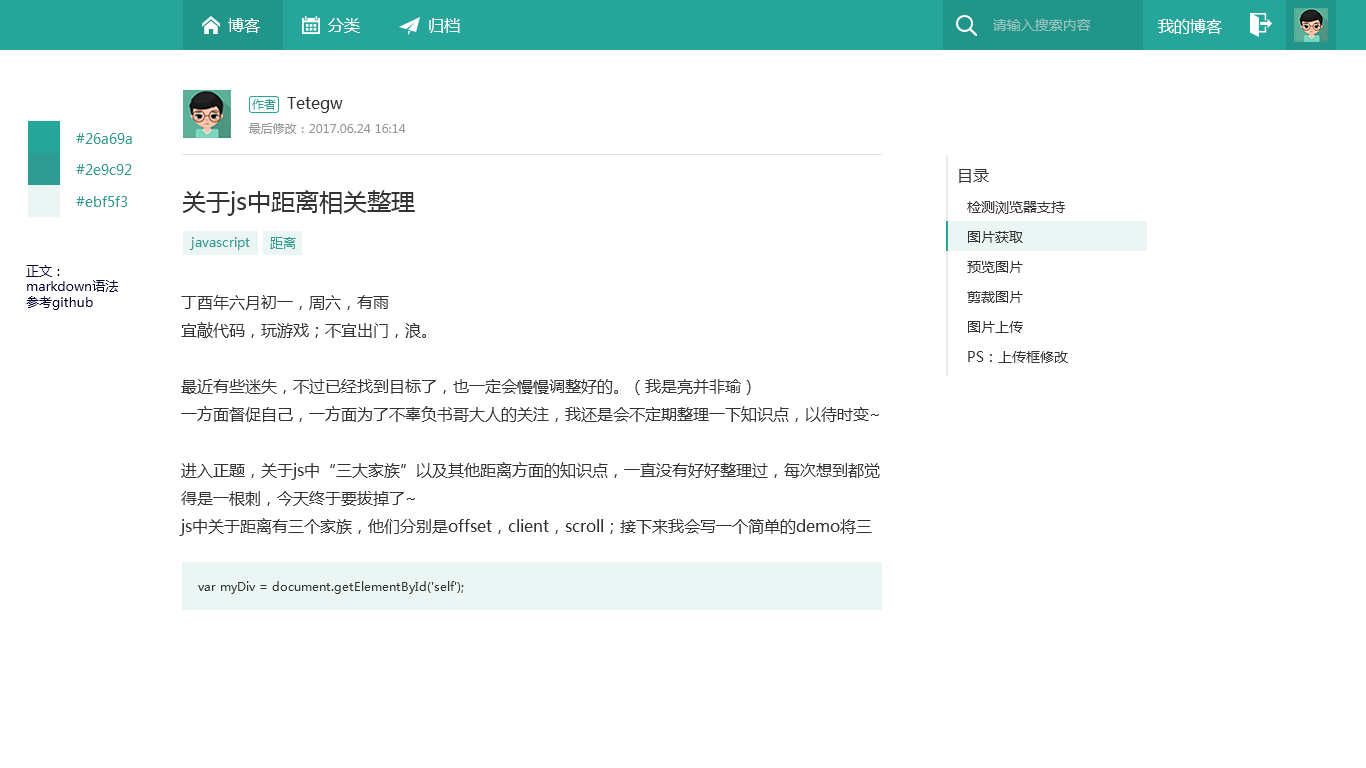
<style>
.page{position:relative;width:1366px;height:768px;background:#ffffff}
.page>*{position:absolute;margin:0}
.t1{font:16px "MicrosoftYaHei";color:#ffffff}
.t2{font:14px "MicrosoftYaHei";color:#95c4be}
.t3{font:12px "MicrosoftYaHei";color:#2e9c92}
.t4{font:16px "MicrosoftYaHei";color:#333333}
.t5{font:12px "MicrosoftYaHei";color:#969696}
.t6{font:14px "MicrosoftYaHei";color:#2e9c92}
.t7{font:24px "MicrosoftYaHei";color:#333333}
.t8{font:14px "MicrosoftYaHei";color:#333333}
.t9{font:13px "MicrosoftYaHei";color:#2e9c92}
.t10{font:13px "MicrosoftYaHei";color:#000033}
.t11{font:16px/28px "MicrosoftYaHei";color:#333333}
.t12{font:12px "MicrosoftYaHei";color:#333333}
</style>
<div class="page">
<p class="t1" style="left:228px;top:18px;width:32px;height:15px">博客</p>
<p class="t1" style="left:328px;top:18px;width:32px;height:15px">分类</p>
<p class="t1" style="left:429px;top:18px;width:31px;height:15px">归档</p>
<p class="t2" style="left:993px;top:19px;width:98px;height:12px">请输入搜索内容</p>
<p class="t1" style="left:1158px;top:19px;width:64px;height:15px">我的博客</p>
<p class="t3" style="left:252px;top:99px;width:24px;height:11px">作者</p>
<p class="t4" style="left:287px;top:97px;width:56px;height:16px">Tetegw</p>
<p class="t5" style="left:248px;top:123px;width:158px;height:11px">最后修改：2017.06.24 16:14</p>
<p class="t6" style="left:76px;top:133px;width:56px;height:11px">#26a69a</p>
<p class="t6" style="left:76px;top:164px;width:56px;height:11px">#2e9c92</p>
<p class="t4" style="left:959px;top:169px;width:30px;height:14px">目录</p>
<p class="t6" style="left:76px;top:196px;width:52px;height:11px">#ebf5f3</p>
<p class="t7" style="left:182px;top:190px;width:233px;height:26px">关于js中距离相关整理</p>
<p class="t8" style="left:967px;top:201px;width:98px;height:13px">检测浏览器支持</p>
<p class="t8" style="left:968px;top:231px;width:55px;height:12px">图片获取</p>
<p class="t9" style="left:189px;top:237px;width:61px;height:13px">javascript</p>
<p class="t9" style="left:270px;top:237px;width:26px;height:12px">距离</p>
<p class="t10" style="left:26px;top:265px;width:93px;height:45px">正文：<br>markdown语法<br>参考github</p>
<p class="t8" style="left:967px;top:261px;width:56px;height:12px">预览图片</p>
<p class="t8" style="left:967px;top:291px;width:56px;height:12px">剪裁图片</p>
<p class="t11" style="left:179px;top:295px;width:701px;height:241px">丁酉年六月初一，周六，有雨<br>宜敲代码，玩游戏；不宜出门，浪。<br><br>最近有些迷失，不过已经找到目标了，也一定会慢慢调整好的。（我是亮并非瑜）<br>一方面督促自己，一方面为了不辜负书哥大人的关注，我还是会不定期整理一下知识点，以待时变~<br><br>进入正题，关于js中“三大家族”以及其他距离方面的知识点，一直没有好好整理过，每次想到都觉得是一根刺，今天终于要拔掉了~<br>js中关于距离有三个家族，他们分别是offset，client，scroll；接下来我会写一个简单的demo将三大家族以及相关的属性或方法具体解释一下：</p>
<p class="t8" style="left:968px;top:321px;width:55px;height:12px">图片上传</p>
<p class="t8" style="left:968px;top:351px;width:100px;height:12px">PS：上传框修改</p>
<p class="t12" style="left:198px;top:581px;width:266px;height:13px">var myDiv = document.getElementById('self');</p>
</div>
